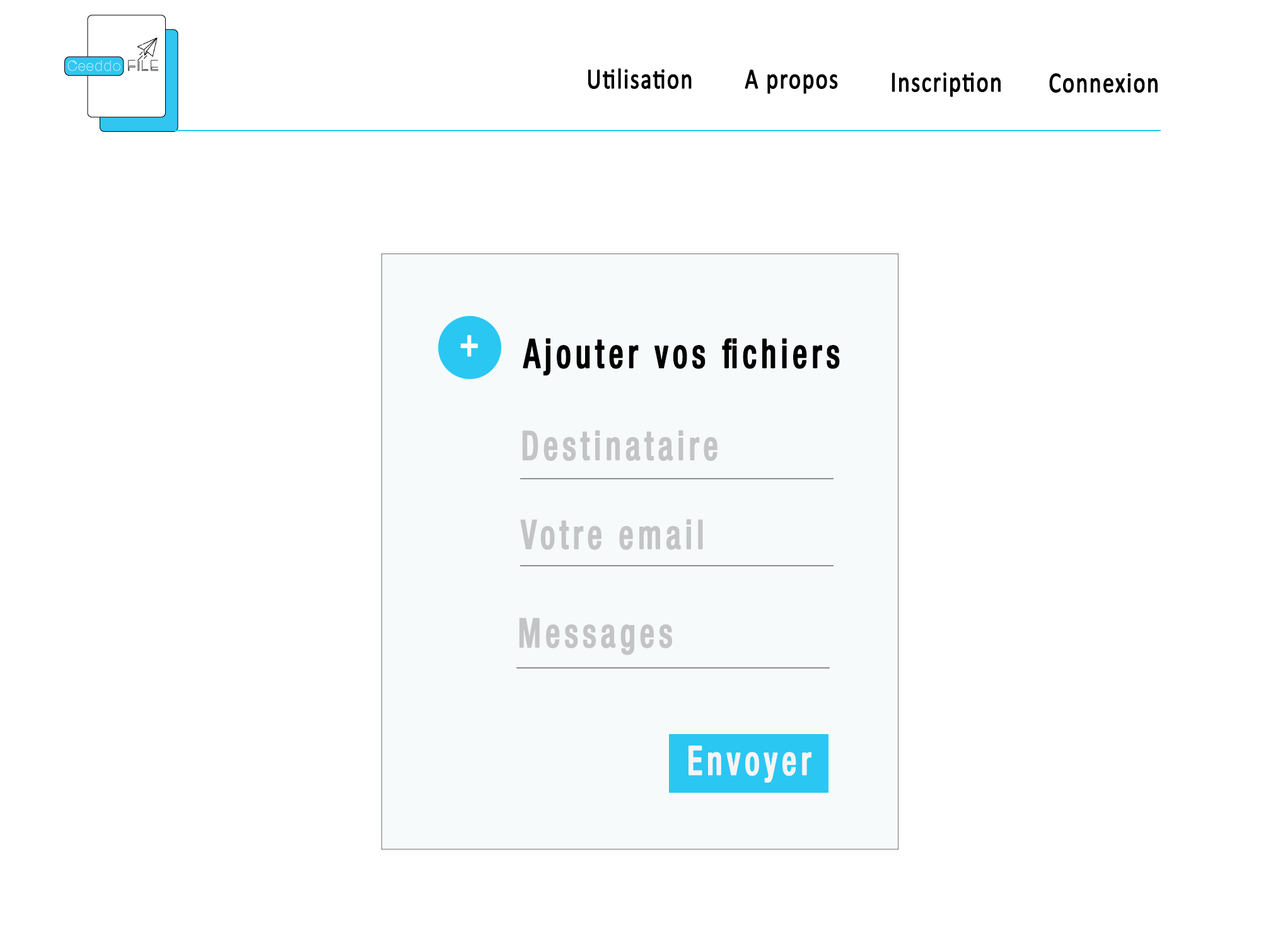
<style>
.page{position:relative;width:1261px;height:946px;background:#ffffff}
.page>*{position:absolute;margin:0}
.t1{font:28.8px "Calibri";letter-spacing:0.04em;color:#030303;font-weight:bold;scale:0.79 1}
.t2{font:40px "HelveticaNeueLTStd-MdCn";letter-spacing:0.2em;color:#fcfdfd;font-weight:bold;scale:0.79 1}
.t3{font:40px "HelveticaNeueLTStd-MdCn";letter-spacing:0.12em;color:#010101;font-weight:bold;scale:0.79 1}
.t4{font:40px "HelveticaNeueLTStd-MdCn";letter-spacing:0.12em;color:#c3c4c5;font-weight:bold;scale:0.79 1}
.t5{font:40px "HelveticaNeueLTStd-MdCn";letter-spacing:0.12em;color:#f8f5f5;font-weight:bold;scale:0.79 1}
</style>
<div class="page">
<p class="t1" style="left:588px;top:68px;width:104px;height:21px">Utilisation</p>
<p class="t1" style="left:745px;top:69px;width:93px;height:25px">A propos</p>
<p class="t1" style="left:891px;top:72px;width:110px;height:25px">Inscription</p>
<p class="t1" style="left:1049px;top:73px;width:109px;height:20px">Connexion</p>
<p class="t2" style="left:460px;top:335px;width:18px;height:22px">+</p>
<p class="t3" style="left:523px;top:338px;width:317px;height:38px">Ajouter vos fichiers</p>
<p class="t4" style="left:522px;top:430px;width:195px;height:31px">Destinataire</p>
<p class="t4" style="left:520px;top:519px;width:183px;height:31px">Votre email</p>
<p class="t4" style="left:519px;top:617px;width:153px;height:38px">Messages</p>
<p class="t5" style="left:688px;top:745px;width:123px;height:37px">Envoyer</p>
</div>
